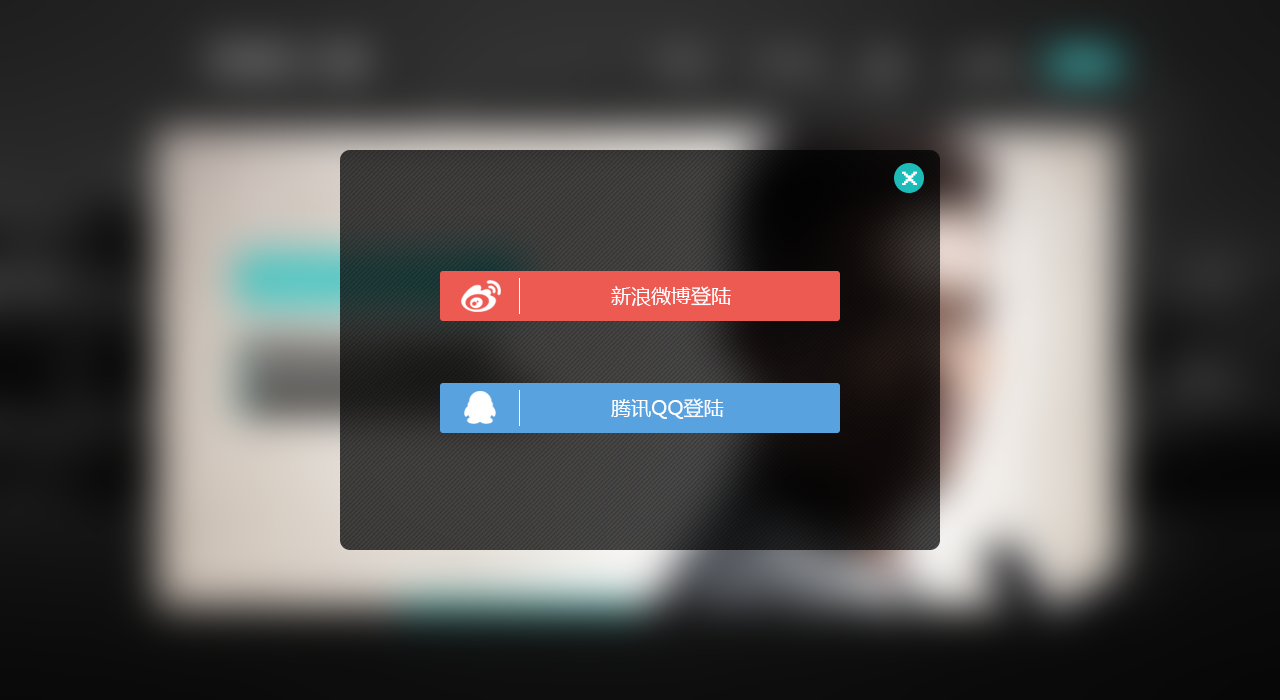
<style>
.page{position:relative;width:1280px;height:700px}
.page>*{position:absolute;margin:0}
.t1{font:30px "System";color:#ffffff}
.t2{font:20px "MicrosoftYaHei";color:#ffffff}
</style>
<div class="page">
<p class="t1" style="left:902px;top:171px;width:15px;height:14px">x</p>
<p class="t2" style="left:611px;top:286px;width:120px;height:20px">新浪微博登陆</p>
<p class="t2" style="left:611px;top:398px;width:113px;height:21px">腾讯QQ登陆</p>
</div>
